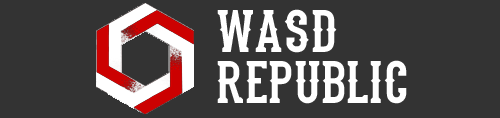
<style>
.page{position:relative;width:500px;height:118px;background:#333333}
.page>*{position:absolute;margin:0}
.t1{font:60px "Stadium1946-Regular";color:#ffffff}
</style>
<div class="page">
<p class="t1" style="left:217px;top:9px;width:120px;height:44px">WASD</p>
<p class="t1" style="left:217px;top:60px;width:190px;height:44px">republic</p>
</div>
